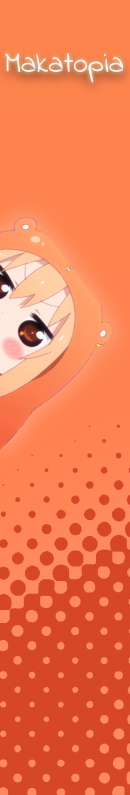
<style>
.page{position:relative;width:130px;height:795px;background:#d64728}
.page>*{position:absolute;margin:0}
.t1{font:30px "IndieFlower";color:#f3f3f3}
</style>
<div class="page">
<p class="t1" style="left:5px;top:53px;width:119px;height:30px">Makatopia</p>
</div>
